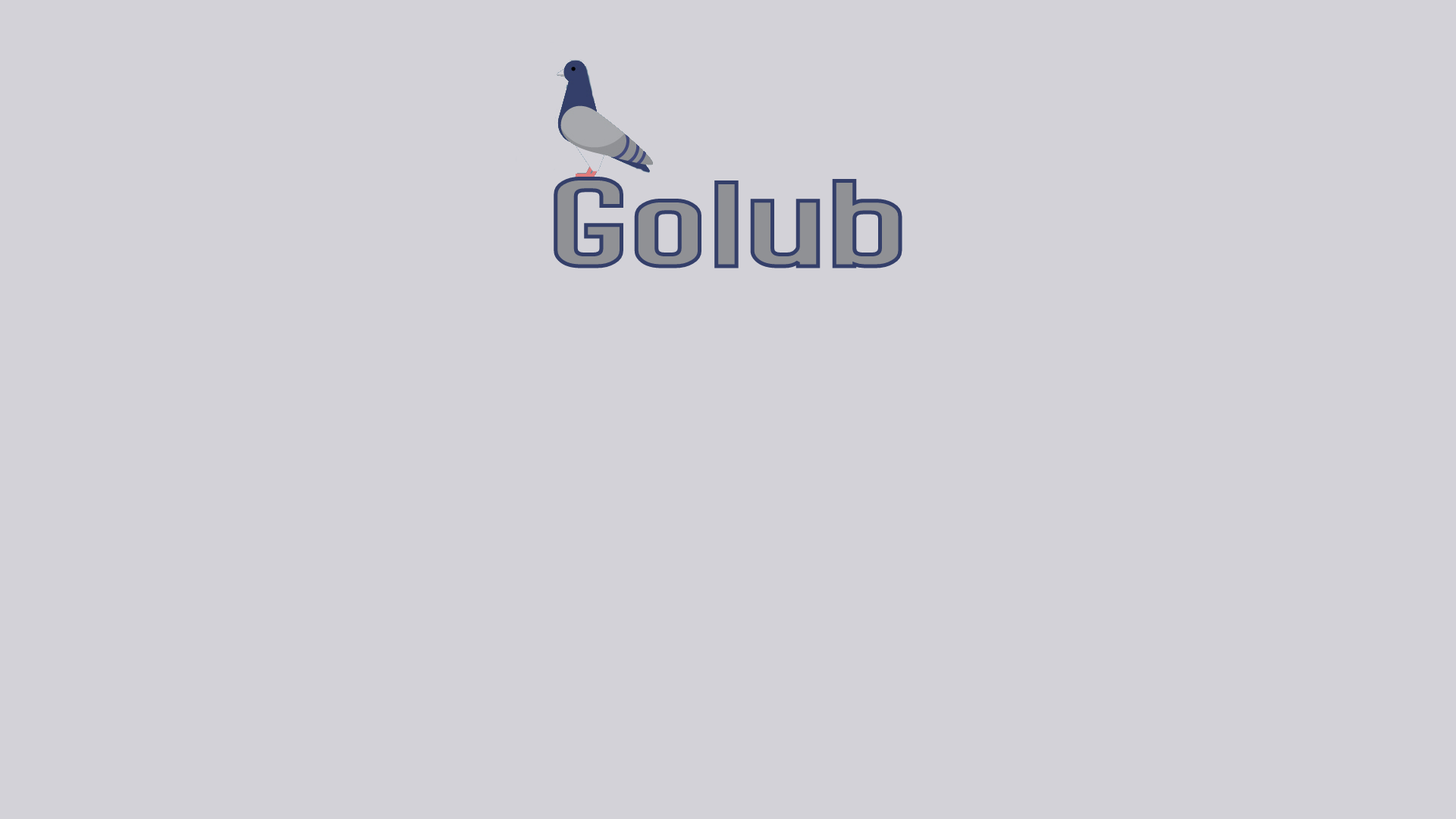
<style>
.page{position:relative;width:1456px;height:819px;background:#d3d2d8}
.page>*{position:absolute;margin:0}
.t1{font:182px "Dhurjati";color:#909195}
</style>
<div class="page">
<p class="t1" style="left:553px;top:176px;width:349px;height:92px">Golub</p>
</div>
